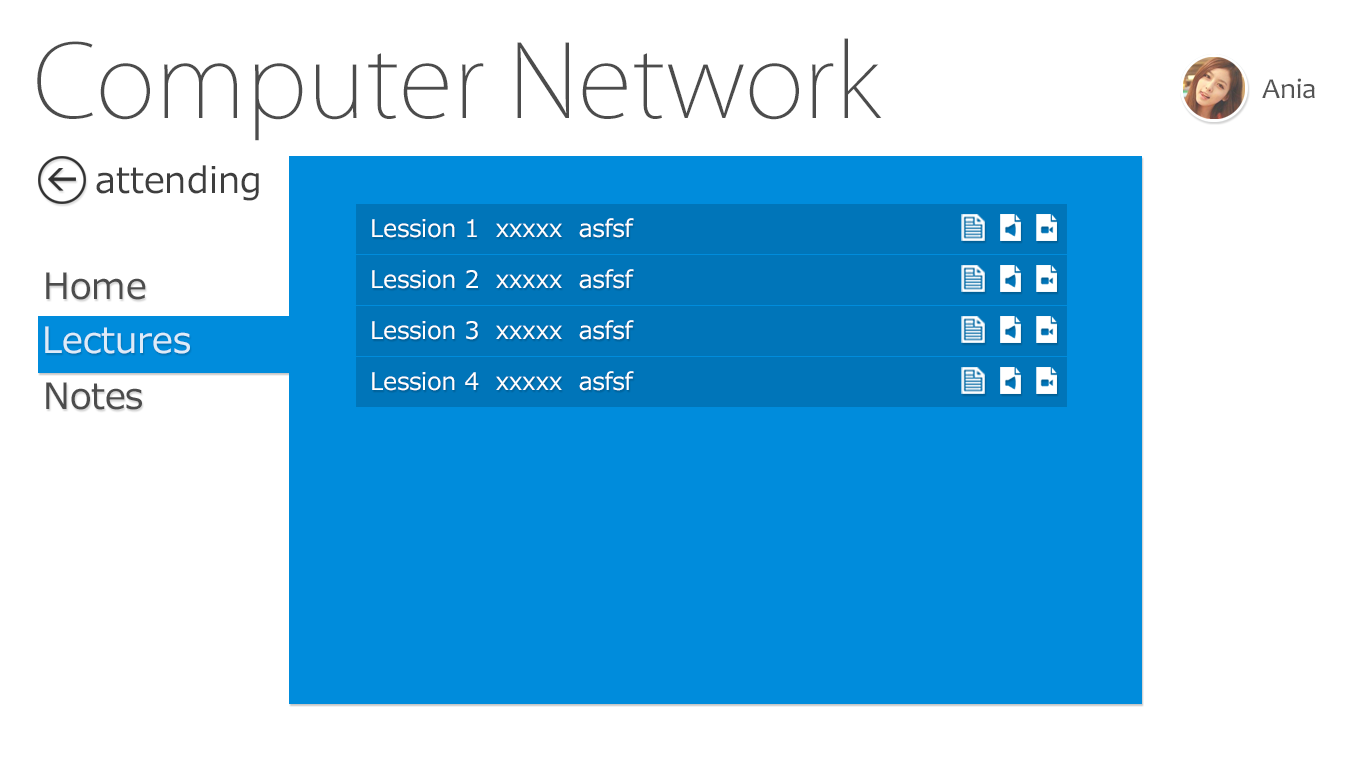
<style>
.page{position:relative;width:1366px;height:768px;background:#ffffff}
.page>*{position:absolute;margin:0}
.t1{font:100px "KozGoPr6N-ExtraLight";color:#4c4c4c}
.t2{font:29.2px "Candara";color:#545454}
.t3{font:36px "Meiryo";color:#3e3e3e}
.t4{font:24px "Meiryo";color:#ffffff}
.t5{font:36px "Meiryo";color:#4c4c4c}
.t6{font:36px "Meiryo";color:#ddebf8}
</style>
<div class="page">
<p class="t1" style="left:37px;top:38px;width:845px;height:103px">Computer Network</p>
<p class="t2" style="left:1262px;top:78px;width:53px;height:21px">Ania</p>
<p class="t3" style="left:96px;top:165px;width:163px;height:36px">attending</p>
<p class="t4" style="left:372px;top:218px;width:262px;height:20px">Lession 1  xxxxx  asfsf</p>
<p class="t4" style="left:372px;top:269px;width:262px;height:20px">Lession 2  xxxxx  asfsf</p>
<p class="t5" style="left:46px;top:272px;width:100px;height:28px">Home</p>
<p class="t5" style="left:46px;top:272px;width:100px;height:28px">Home</p>
<p class="t6" style="left:45px;top:326px;width:145px;height:28px">Lectures</p>
<p class="t4" style="left:372px;top:320px;width:262px;height:20px">Lession 3  xxxxx  asfsf</p>
<p class="t4" style="left:372px;top:371px;width:262px;height:20px">Lession 4  xxxxx  asfsf</p>
<p class="t5" style="left:46px;top:382px;width:96px;height:28px">Notes</p>
<p class="t5" style="left:46px;top:382px;width:96px;height:28px">Notes</p>
</div>
